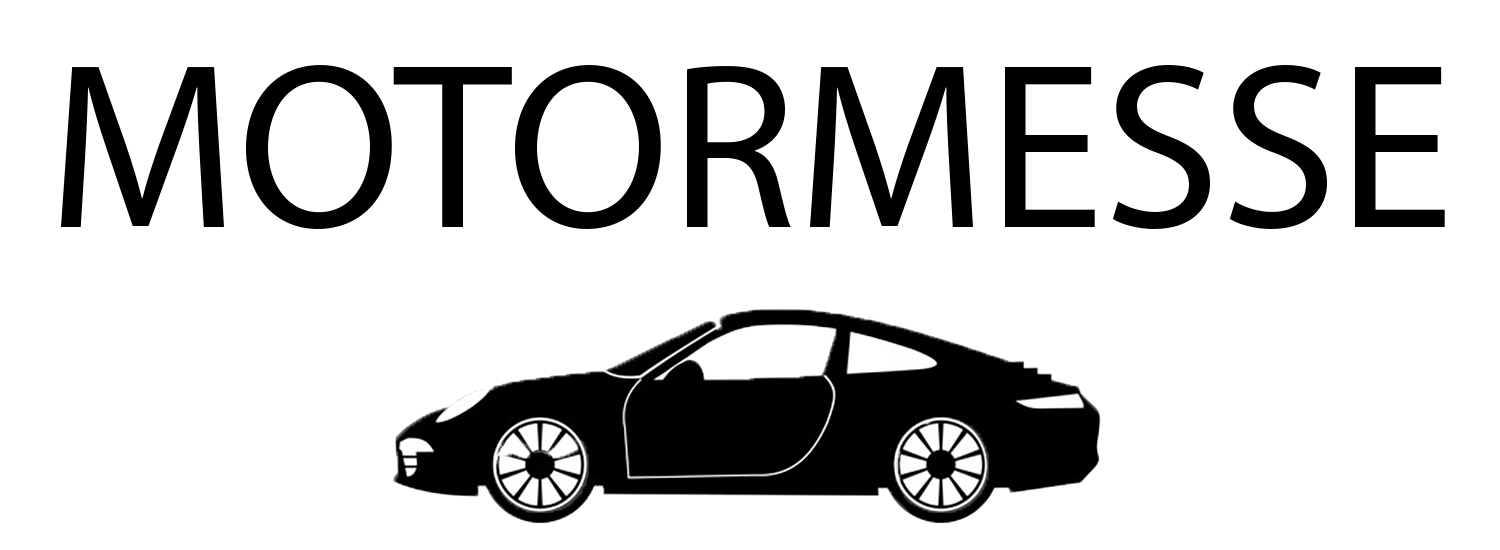
<style>
.page{position:relative;width:1500px;height:550px;background:#ffffff}
.page>*{position:absolute;margin:0}
.t1{font:236.8px "MyriadPro-Regular";color:#000000}
</style>
<div class="page">
<p class="t1" style="left:61px;top:65px;width:1384px;height:164px">MOTORMESSE</p>
</div>
